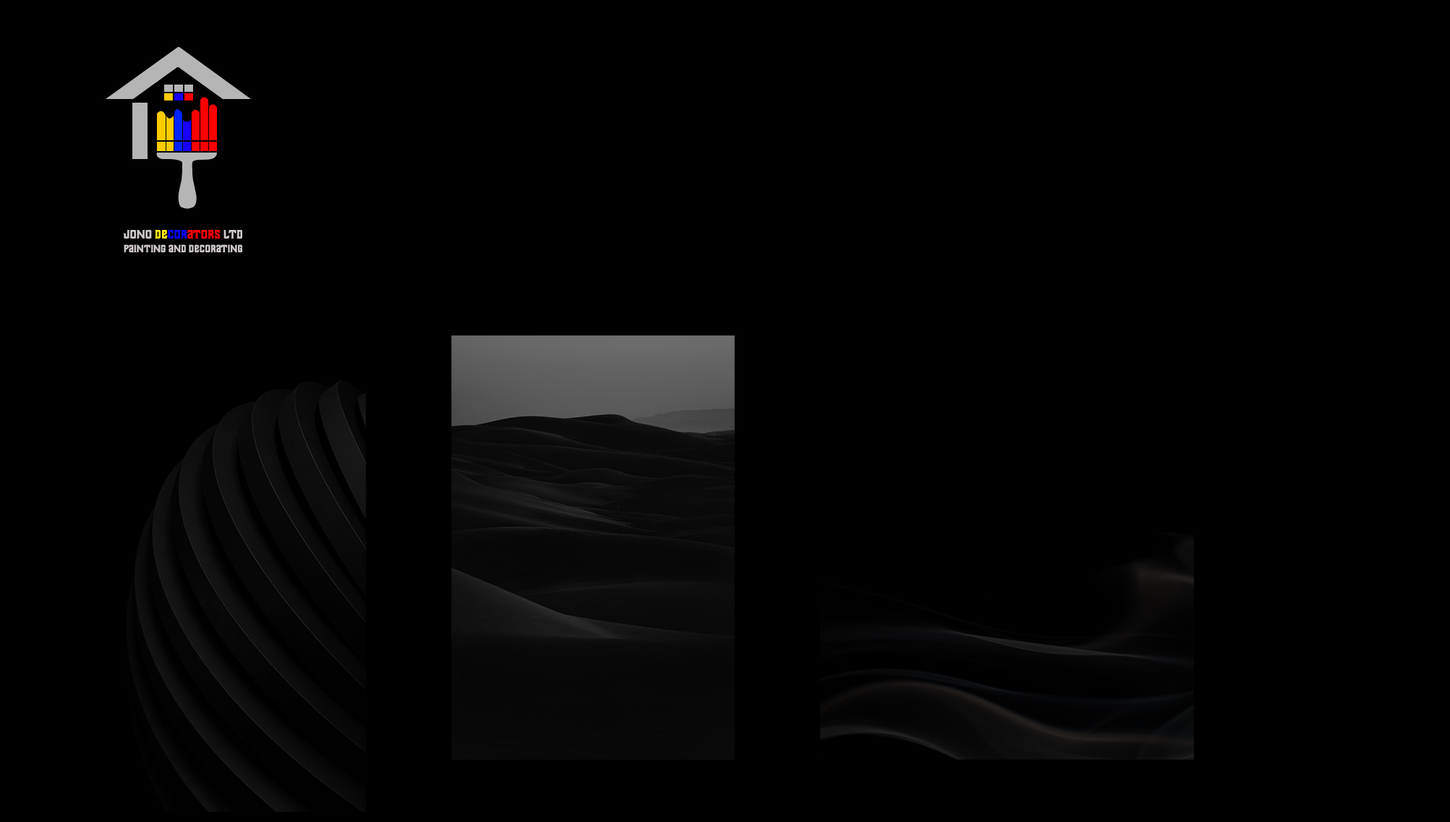
<style>
.page{position:relative;width:1450px;height:822px;background:#000000}
.page>*{position:absolute;margin:0}
.t1{font:11.3px "Thailandesa";color:#ff0000}
.t2{font:11.3px "Thailandesa";color:#cdc7c7}
.t3{font:11.3px "Thailandesa";color:#ffeb10}
.t4{font:11.3px "Thailandesa";color:#0600ff}
.t5{font:9.6px "Thailandesa";color:#cdc7c7}
</style>
<div class="page">
<p class="t1" style="left:123px;top:230px;width:119px;height:9px"><span class="t2">JONO </span><span class="t3">DE</span><span class="t4">COR</span>ATORS<span class="t2"> LTD</span></p>
<p class="t5" style="left:124px;top:244px;width:119px;height:8px">PAINTING AND DECORATING</p>
</div>
